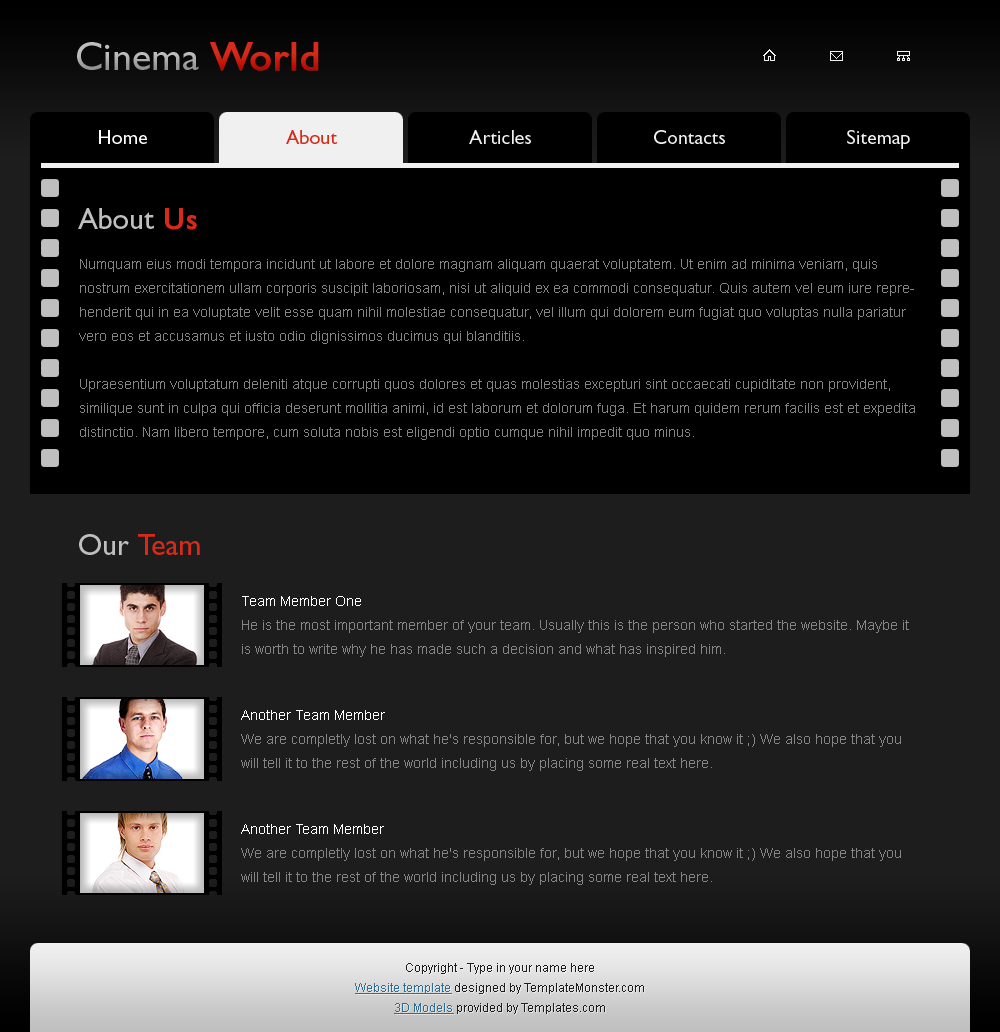
<style>
.page{position:relative;width:1000px;height:1032px;background:#1d1d1d}
.page>*{position:absolute;margin:0}
.t1{font:40px "GillSans";color:#bfbfbf}
.t2{font:40px "GillSans";color:#d72a18;font-weight:bold}
.t3{font:20px "GillSans";color:#ffffff}
.t4{font:20px "GillSans";color:#d72a18}
.t5{font:20px "GillSans";color:#f0f0f0}
.t6{font:30px "GillSans";color:#bfbfbf}
.t7{font:30px "GillSans";color:#d72a18;font-weight:bold}
.t8{font:14px/24px "ArialMT";color:#858585}
.t9{font:30px "GillSans";color:#d72a18}
.t10{font:14px/24px "ArialMT";color:#ffffff}
.t11{font:12px/20px "ArialMT";color:#1d1d1d}
.t12{font:12px/20px "ArialMT";color:#2c6d9a;text-decoration:underline}
</style>
<div class="page">
<p class="t1" style="left:77px;top:42px;width:242px;height:29px">Cinema <span class="t2">World</span></p>
<p class="t3" style="left:99px;top:130px;width:48px;height:14px">Home</p>
<p class="t4" style="left:286px;top:130px;width:52px;height:14px">About          Articles          Contacts          Site map</p>
<p class="t5" style="left:469px;top:130px;width:62px;height:14px">Articles          Contacts          Site map</p>
<p class="t5" style="left:654px;top:130px;width:71px;height:14px">Contacts          Site map</p>
<p class="t5" style="left:847px;top:130px;width:63px;height:19px">Sitemap</p>
<p class="t6" style="left:78px;top:208px;width:119px;height:22px">About<span class="t7"> Us</span></p>
<p class="t8" style="left:79px;top:259px;width:836px;height:181px">Numquam eius modi tempora incidunt ut labore et dolore magnam aliquam quaerat voluptatem. Ut enim ad minima veniam, quis nostrum exercitationem ullam corporis suscipit laboriosam, nisi ut aliquid ex ea commodi consequatur. Quis autem vel eum iure reprehenderit qui in ea voluptate velit esse quam nihil molestiae consequatur, vel illum qui dolorem eum fugiat quo voluptas nulla pariatur vero eos et accusamus et iusto odio dignissimos ducimus qui blanditiis.<br><br>Upraesentium voluptatum deleniti atque corrupti quos dolores et quas molestias excepturi sint occaecati cupiditate non provident, similique sunt in culpa qui officia deserunt mollitia animi, id est laborum et dolorum fuga. Et harum quidem rerum facilis est et expedita distinctio. Nam libero tempore, cum soluta nobis est eligendi optio cumque nihil impedit quo minus.<br><br> id quod maxime placeat facere possimus, omnis voluptas assumenda est, omnis dolor repellendus. <br><br>Temporibus autem quibusdam et aut officiis debitis aut rerum necessitatibus saepe eveniet ut et voluptates repudiandae sint et molestiae non recusandae. Itaque earum rerum hic tenetur a sapiente delectus, ut aut reiciendis voluptatibus maiores alias consequatur aut perferendis doloribus asperiores repellat.</p>
<p class="t9" style="left:79px;top:534px;width:121px;height:21px"><span class="t6">Our</span> Team</p>
<p class="t8" style="left:242px;top:596px;width:667px;height:61px"><span class="t10">Team Member One<br></span>He is the most important member of your team. Usually this is the person who started the website. Maybe it is worth to write why he has made such a decision and what has inspired him.</p>
<p class="t8" style="left:241px;top:710px;width:660px;height:61px"><span class="t10">Another Team Member<br></span>We are completly lost on what he's responsible for, but we hope that you know it ;) We also hope that you will tell it to the rest of the world including us by placing some real text here.</p>
<p class="t8" style="left:241px;top:824px;width:660px;height:61px"><span class="t10">Another Team Member<br></span>We are completly lost on what he's responsible for, but we hope that you know it ;) We also hope that you will tell it to the rest of the world including us by placing some real text here.</p>
<p class="t11" style="left:355px;top:963px;width:289px;height:51px;text-align:center">Copyright - Type in your name here<br><span class="t12">Website template</span> designed by TemplateMonster.com<br><span class="t12">3D Models</span> provided by Templates.com</p>
</div>
